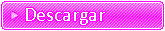
<style>
.page{position:relative;width:165px;height:31px}
.page>*{position:absolute;margin:0}
.t1{font:20px "Calibri";color:#ffffff}
</style>
<div class="page">
<p class="t1" style="left:26px;top:8px;width:79px;height:17px">Descargar</p>
</div>
